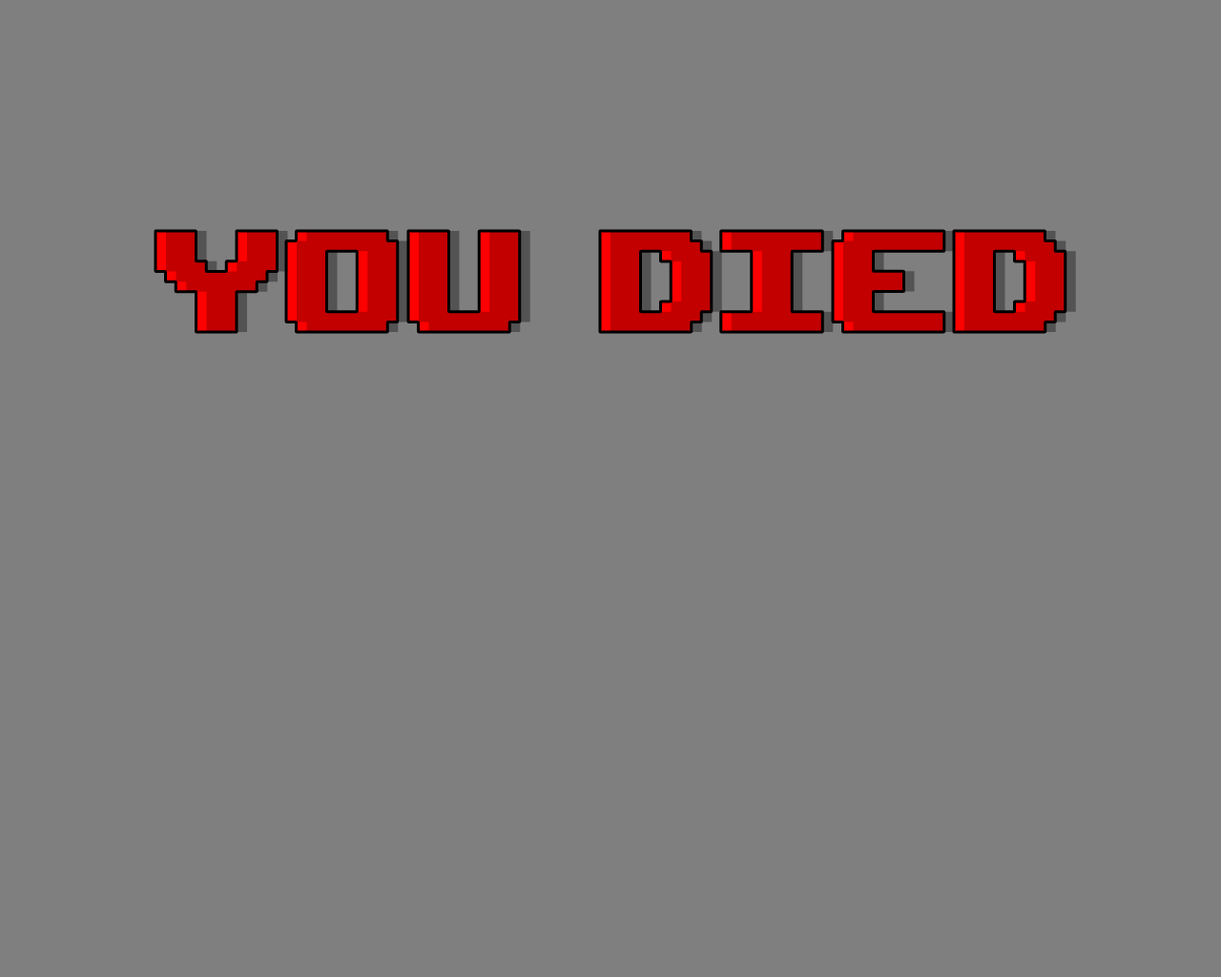
<style>
.page{position:relative;width:1221px;height:977px;background:#7f7f7f}
.page>*{position:absolute;margin:0}
.t1{font:202.2px "UpheavalTT-BRK-";color:#c20000}
</style>
<div class="page">
<p class="t1" style="left:155px;top:231px;width:910px;height:101px">YOU died</p>
<p class="t1" style="left:166px;top:231px;width:910px;height:101px">YOU died</p>
</div>
